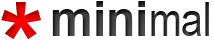
<style>
.page{position:relative;width:212px;height:40px;background:#ffffff}
.page>*{position:absolute;margin:0}
.t1{font:111.3px "Arial-BoldMT"}
.t2{font:48px "Arial-BoldMT"}
.t3{font:48px "ArialNarrow"}
</style>
<div class="page">
<p class="t1" style="left:1px;top:2px;width:40px;height:37px">*</p>
<p class="t2" style="left:52px;top:1px;width:157px;height:35px">mini<span class="t3">mal</span></p>
</div>
